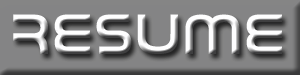
<style>
.page{position:relative;width:300px;height:75px;background:#848485}
.page>*{position:absolute;margin:0}
.t1{font:55px "DroidLogo-Bold"}
</style>
<div class="page">
<p class="t1" style="left:13px;top:14px;width:269px;height:40px">RESUME</p>
</div>
